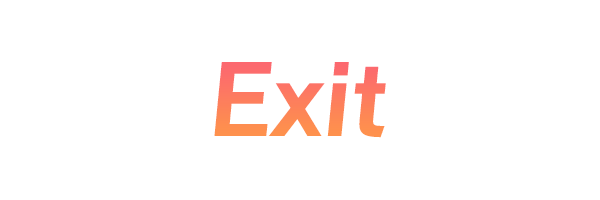
<style>
.page{position:relative;width:600px;height:200px;background:#ffffff}
.page>*{position:absolute;margin:0}
.t1{font:95px "Calamity-Bold";color:#fd7f5d}
</style>
<div class="page">
<p class="t1" style="left:214px;top:62px;width:172px;height:76px">Exit</p>
</div>
